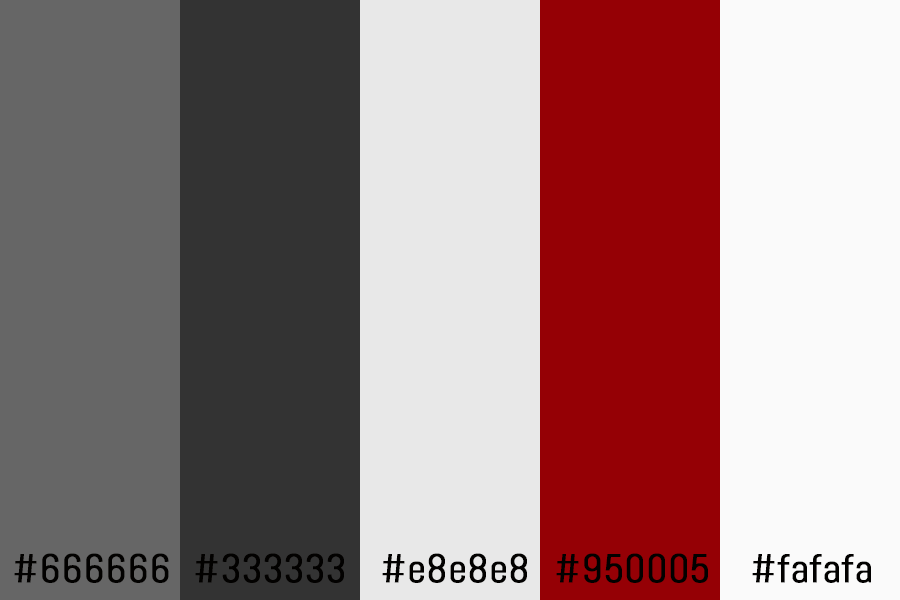
<style>
.page{position:relative;width:900px;height:600px;background:#fafafa}
.page>*{position:absolute;margin:0}
.t1{font:40px "Abel-Regular";color:#020100;font-weight:bold}
</style>
<div class="page">
<p class="t1" style="left:14px;top:553px;width:155px;height:30px">#666666</p>
<p class="t1" style="left:195px;top:553px;width:149px;height:30px">#333333</p>
<p class="t1" style="left:382px;top:553px;width:145px;height:30px">#e8e8e8</p>
<p class="t1" style="left:556px;top:553px;width:152px;height:30px">#950005</p>
<p class="t1" style="left:752px;top:554px;width:119px;height:29px">#fafafa</p>
</div>
